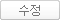
<style>
.page{position:relative;width:60px;height:20px;background:#ffffff}
.page>*{position:absolute;margin:0}
.t1{font:12px "Dotum";color:#757575}
</style>
<div class="page">
<p class="t1" style="left:19px;top:5px;width:21px;height:11px">수정</p>
</div>
